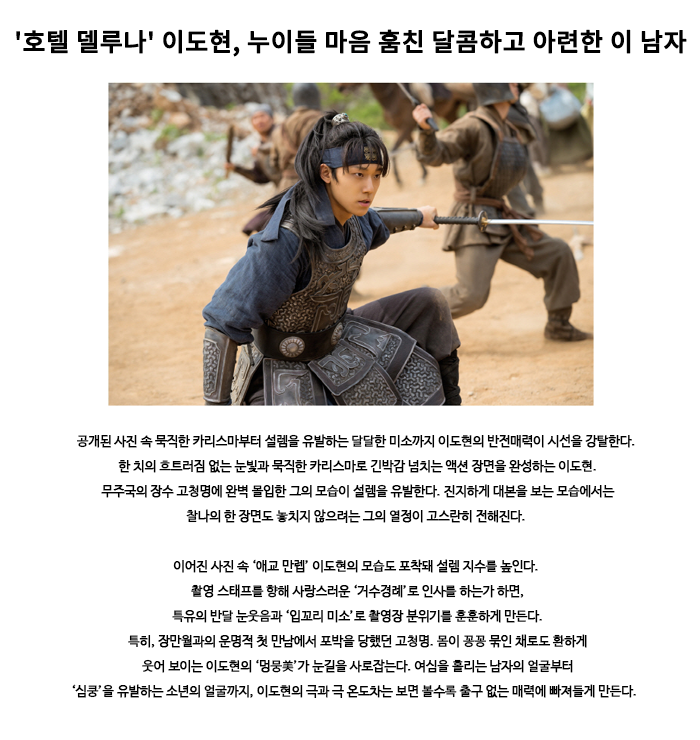
<style>
.page{position:relative;width:700px;height:740px;background:#ffffff}
.page>*{position:absolute;margin:0}
.t1{font:25px "NotoSansCJKkr-Medium";color:#000000;font-weight:bold}
.t2{font:12.5px/25px "NanumBarunGothic";color:#000000;font-weight:bold}
</style>
<div class="page">
<p class="t1" style="left:16px;top:29px;width:671px;height:28px">'호텔 델루나' 이도현, 누이들 마음 훔친 달콤하고 아련한 이 남자​ ​</p>
<p class="t2" style="left:72px;top:434px;width:564px;height:264px;text-align:center">공개된 사진 속 묵직한 카리스마부터 설렘을 유발하는 달달한 미소까지 이도현의 반전매력이 시선을 강탈한다.<br> 한 치의 흐트러짐 없는 눈빛과 묵직한 카리스마로 긴박감 넘치는 액션 장면을 완성하는 이도현.<br> 무주국의 장수 고청명에 완벽 몰입한 그의 모습이 설렘을 유발한다. 진지하게 대본을 보는 모습에서는<br> 찰나의 한 장면도 놓치지 않으려는 그의 열정이 고스란히 전해진다. <br><br>이어진 사진 속 ‘애교 만렙’ 이도현의 모습도 포착돼 설렘 지수를 높인다.<br> 촬영 스태프를 향해 사랑스러운 ‘거수경례’로 인사를 하는가 하면,<br> 특유의 반달 눈웃음과 ‘입꼬리 미소’로 촬영장 분위기를 훈훈하게 만든다.<br> 특히, 장만월과의 운명적 첫 만남에서 포박을 당했던 고청명. 몸이 꽁꽁 묶인 채로도 환하게<br> 웃어 보이는 이도현의 ‘멍뭉美’가 눈길을 사로잡는다. 여심을 홀리는 남자의 얼굴부터<br> ‘심쿵’을 유발하는 소년의 얼굴까지, 이도현의 극과 극 온도차는 보면 볼수록 출구 없는 매력에 빠져들게 만든다.</p>
</div>
